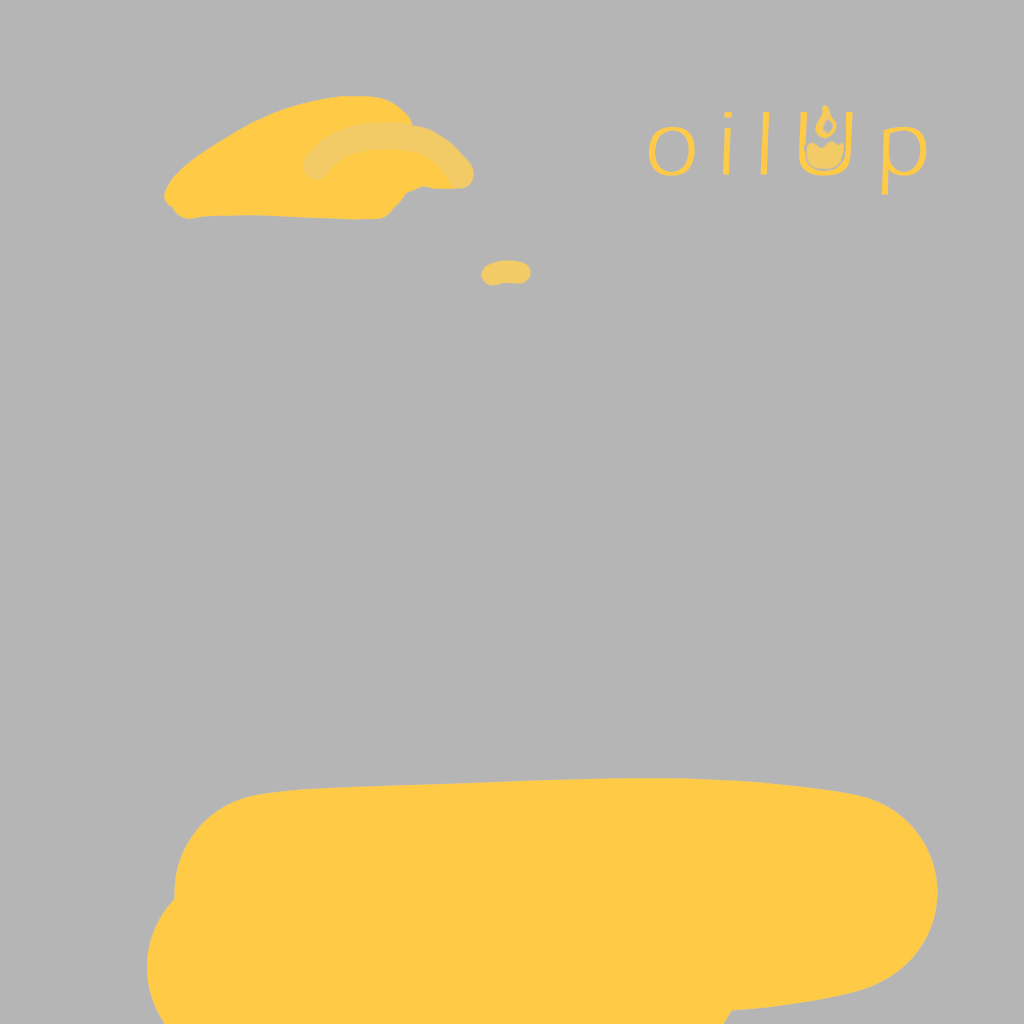
<style>
.page{position:relative;width:1024px;height:1024px;background:#b5b5b5}
.page>*{position:absolute;margin:0}
.t1{font:90.9px "ErasITC-Light";letter-spacing:0.2em;color:#ffcb46;font-weight:bold}
</style>
<div class="page">
<p class="t1" style="left:649px;top:112px;width:278px;height:83px">oilUp</p>
</div>
